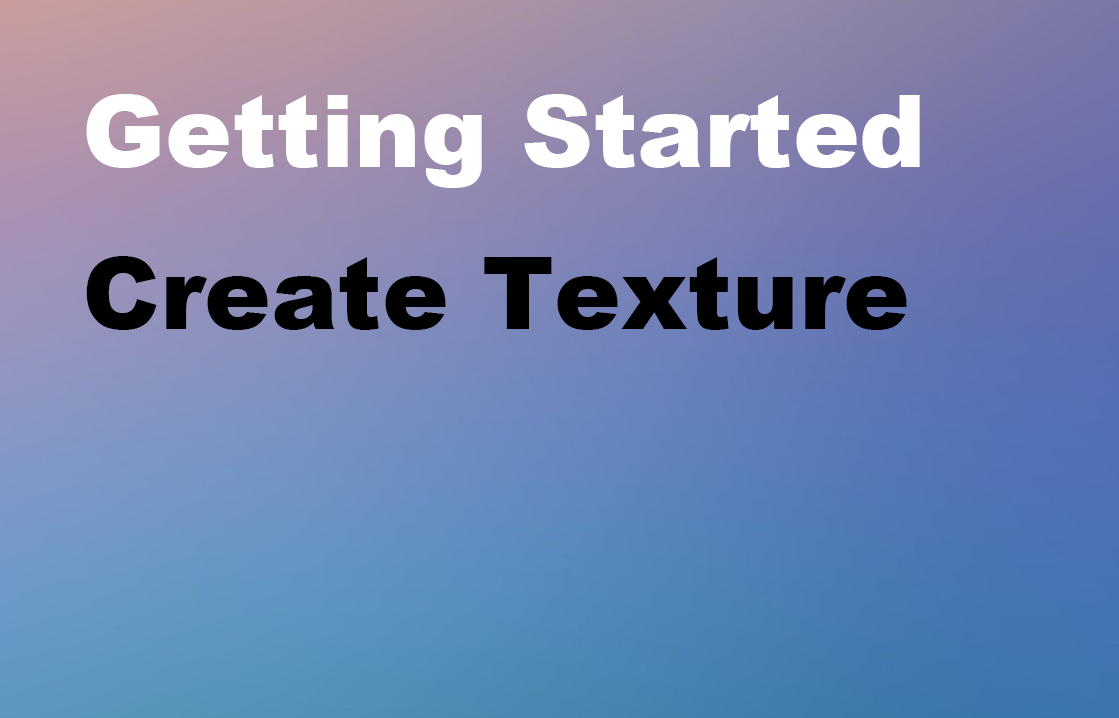
<style>
.page{position:relative;width:1119px;height:718px}
.page>*{position:absolute;margin:0}
.t1{font:100px "Arial-Black";color:#ffffff}
.t2{font:100px "Arial-Black";color:#000000}
</style>
<div class="page">
<p class="t1" style="left:86px;top:94px;width:834px;height:94px">Getting Started</p>
<p class="t2" style="left:86px;top:256px;width:821px;height:74px">Create Texture</p>
</div>
